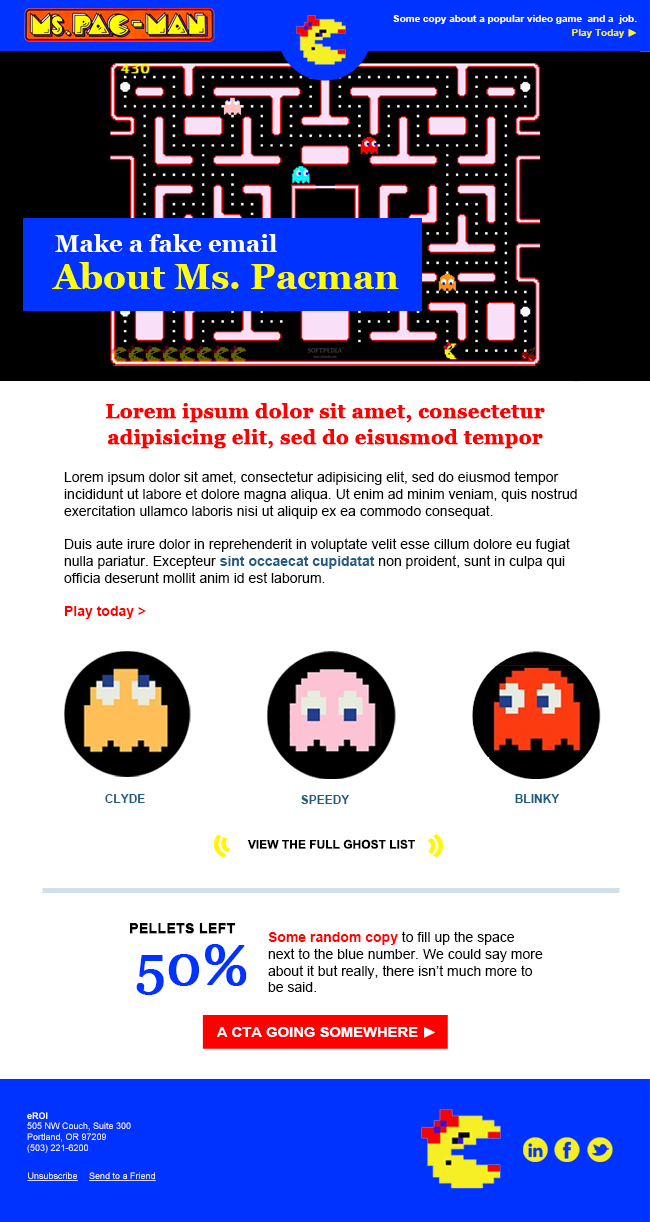
<style>
.page{position:relative;width:650px;height:1222px;background:#ffffff}
.page>*{position:absolute;margin:0}
.t1{font:10px/14px "Arial-BoldMT";color:#ffffff}
.t2{font:10px/14px "Arial-BoldMT";color:#fff600}
.t3{font:9.7px/14px "Arial-BoldMT";color:#fff600;font-weight:bold}
.t4{font:24px "Georgia-Bold";color:#ffffff}
.t5{font:36px "Georgia-Bold";color:#ffff00}
.t6{font:20px/26px "Georgia-Bold";color:#ff0000;font-weight:bold}
.t7{font:14px "ArialMT";color:#000000}
.t8{font:14px "Arial-BoldMT";color:#215c83}
.t9{font:14px "Arial-BoldMT";color:#ff0000}
.t10{font:12px "Arial-BoldMT";color:#215c83}
.t11{font:12px "Arial-BoldMT";color:#000000;text-transform:uppercase}
.t12{font:14px "Arial-BoldMT";color:#000000;font-weight:bold}
.t13{font:56px "Georgia";color:#0033ff;font-weight:bold}
.t14{font:14px "Arial-BoldMT";color:#ffffff;scale:1.06 1}
.t15{font:14px "Arial-BoldMT";color:#ffffff;font-weight:bold;scale:1.06 1}
.t16{font:9px "ArialMT";color:#ffffff}
.t17{font:9px "Arial-BoldMT";color:#ffffff}
.t18{font:9px "ArialMT";color:#ffffff;text-decoration:underline}
</style>
<div class="page">
<p class="t1" style="left:393px;top:15px;width:244px;height:23px;text-align:right">Some copy about a popular video game  and a  job.<br><span class="t2">Play Today </span><span class="t3">►</span></p>
<p class="t4" style="left:55px;top:234px;width:222px;height:18px">Make a fake email</p>
<p class="t5" style="left:52px;top:262px;width:347px;height:27px">About Ms. Pacman</p>
<p class="t6" style="left:105px;top:403px;width:440px;height:46px;text-align:center">Lorem ipsum dolor sit amet, consectetur adipisicing elit, sed do eisusmod tempor</p>
<p class="t7" style="left:64px;top:471px;width:513px;height:148px">Lorem ipsum dolor sit amet, consectetur adipisicing elit, sed do eiusmod tempor incididunt ut labore et dolore magna aliqua. Ut enim ad minim veniam, quis nostrud exercitation ullamco laboris nisi ut aliquip ex ea commodo consequat. <br><br>Duis aute irure dolor in reprehenderit in voluptate velit esse cillum dolore eu fugiat nulla pariatur. Excepteur <span class="t8">sint occaecat cupidatat </span>non proident, sunt in culpa qui officia deserunt mollit anim id est laborum. <br><br><span class="t9">Play today &gt;</span></p>
<p class="t10" style="left:105px;top:794px;width:40px;height:9px">CLYDE</p>
<p class="t10" style="left:301px;top:795px;width:49px;height:9px">SPEEDY</p>
<p class="t10" style="left:515px;top:794px;width:45px;height:9px">BLINKY</p>
<p class="t11" style="left:247px;top:839px;width:168px;height:10px">View the full GHOST list</p>
<p class="t12" style="left:130px;top:923px;width:106px;height:11px">PELLETS LEFT</p>
<p class="t7" style="left:268px;top:931px;width:275px;height:61px"><span class="t9">Some random copy</span> to fill up the space next to the blue number. We could say more about it but really, there isn’t much more to be said.</p>
<p class="t13" style="left:136px;top:944px;width:111px;height:51px">50%</p>
<p class="t14" style="left:217px;top:1027px;width:218px;height:11px">A CTA GOING SOMEWHERE <span class="t15">►</span></p>
<p class="t16" style="left:27px;top:1112px;width:104px;height:41px"><span class="t17">eROI<br></span>505 NW Couch, Suite 300<br>Portland, OR 97209<br>(503) 221-6200</p>
<p class="t18" style="left:27px;top:1172px;width:51px;height:9px"><span class="t16"> </span>Unsubscribe</p>
<p class="t18" style="left:89px;top:1172px;width:67px;height:9px">Send to a Friend</p>
</div>
